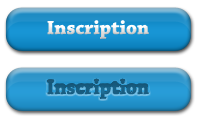
<style>
.page{position:relative;width:198px;height:120px;background:#ffffff}
.page>*{position:absolute;margin:0}
.t1{font:20px "ChaparralPro-Bold"}
.t2{font:20px "ChaparralPro-Bold";color:#185d82}
</style>
<div class="page">
<p class="t1" style="left:47px;top:20px;width:102px;height:19px">Inscription</p>
<p class="t2" style="left:47px;top:80px;width:102px;height:19px">Inscription</p>
</div>
